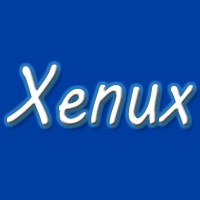
<style>
.page{position:relative;width:200px;height:200px;background:#003da1}
.page>*{position:absolute;margin:0}
.t1{font:80px "MVBoli";color:#ffffff;scale:0.82 1}
</style>
<div class="page">
<p class="t1" style="left:7px;top:64px;width:187px;height:62px">Xenux</p>
</div>
